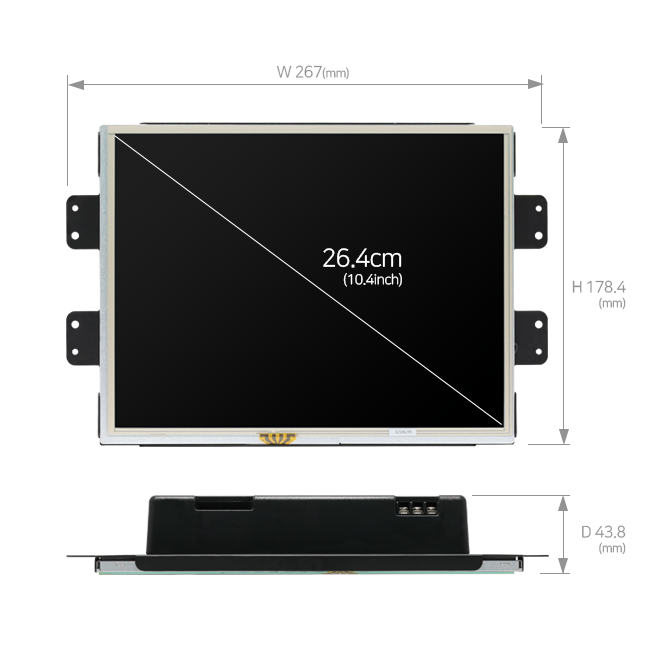
<style>
.page{position:relative;width:650px;height:650px;background:#ffffff}
.page>*{position:absolute;margin:0}
.t1{font:16px "NanumSquareR";letter-spacing:-0.03em;color:#939393}
.t2{font:12px "NanumSquareR";letter-spacing:-0.03em;color:#939393}
.t3{font:14px/18px "NanumSquareR";letter-spacing:-0.03em;color:#ffffff}
.t4{font:25px/18px "NanumSquareR";letter-spacing:-0.03em;color:#ffffff}
.t5{font:16px/15px "NanumSquareR";letter-spacing:-0.03em;color:#939393}
.t6{font:12px/15px "NanumSquareR";letter-spacing:-0.03em;color:#939393}
</style>
<div class="page">
<p class="t1" style="left:276px;top:65px;width:73px;height:15px">W 267<span class="t2">(mm)</span></p>
<p class="t3" style="left:323px;top:248px;width:79px;height:39px;text-align:right"><span class="t4">26.4cm<br></span>(10.4inch)</p>
<p class="t5" style="left:572px;top:280px;width:54px;height:30px;text-align:right">H 178.4<br><span class="t6">(mm)</span></p>
<p class="t5" style="left:582px;top:525px;width:44px;height:30px;text-align:right">D 43.8<br><span class="t6">(mm)</span></p>
</div>
